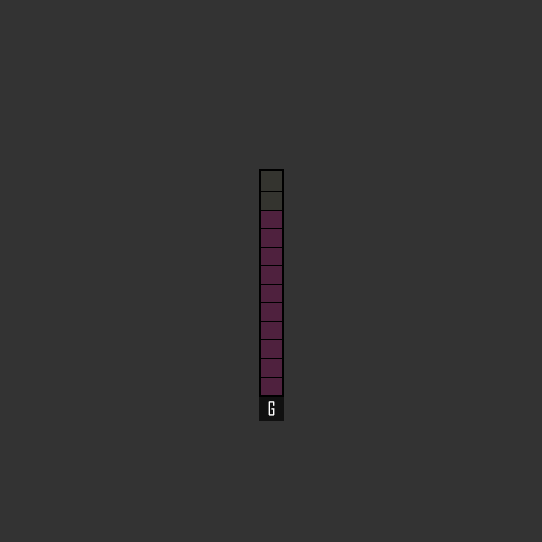
<style>
.page{position:relative;width:542px;height:542px;background:#333333}
.page>*{position:absolute;margin:0}
.t1{font:18.8px "AgencyFB-Reg";color:#ffffff;scale:0.92 1}
</style>
<div class="page">
<p class="t1" style="left:268px;top:401px;width:7px;height:15px">G</p>
</div>
